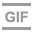
<style>
.page{position:relative;width:33px;height:33px;background:#ffffff}
.page>*{position:absolute;margin:0}
.t1{font:14.4px "Arial-BoldMT";color:#9b9b9b}
</style>
<div class="page">
<p class="t1" style="left:5px;top:11px;width:23px;height:12px">GIF</p>
</div>
